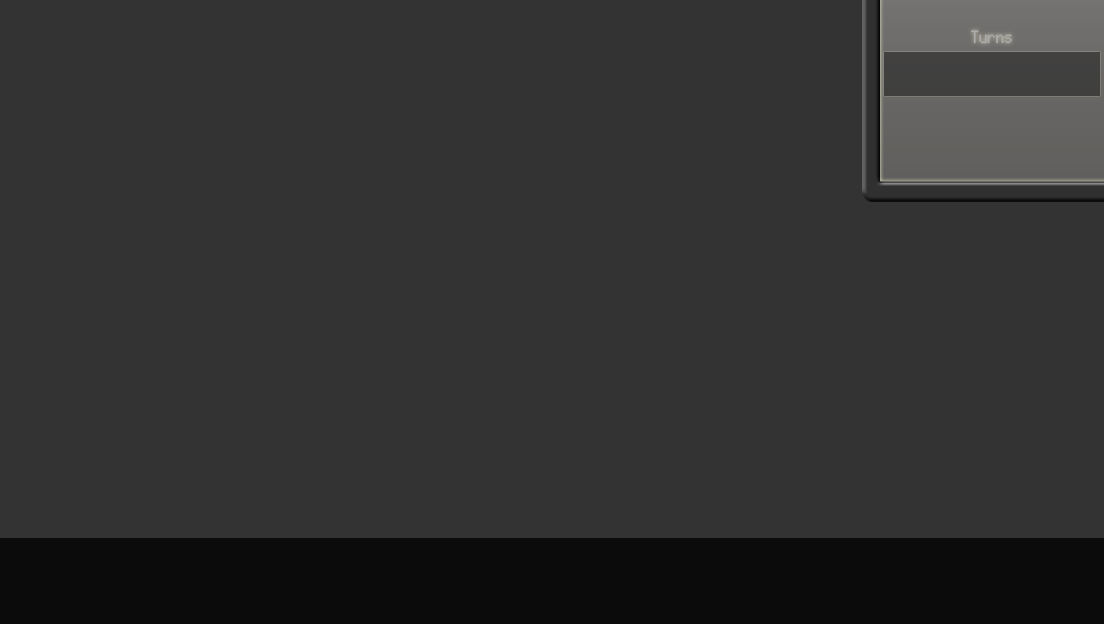
<style>
.page{position:relative;width:1104px;height:624px;background:#333333}
.page>*{position:absolute;margin:0}
.t1{font:18px "PowerClear-Regular";color:#acabaa}
</style>
<div class="page">
<p class="t1" style="left:971px;top:30px;width:41px;height:14px">Turns</p>
</div>
